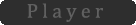
<style>
.page{position:relative;width:136px;height:25px;background:#2e2e2e}
.page>*{position:absolute;margin:0}
.t1{font:20px "Cambria";color:#606060}
</style>
<div class="page">
<p class="t1" style="left:27px;top:3px;width:76px;height:19px">P l a y e r</p>
</div>
